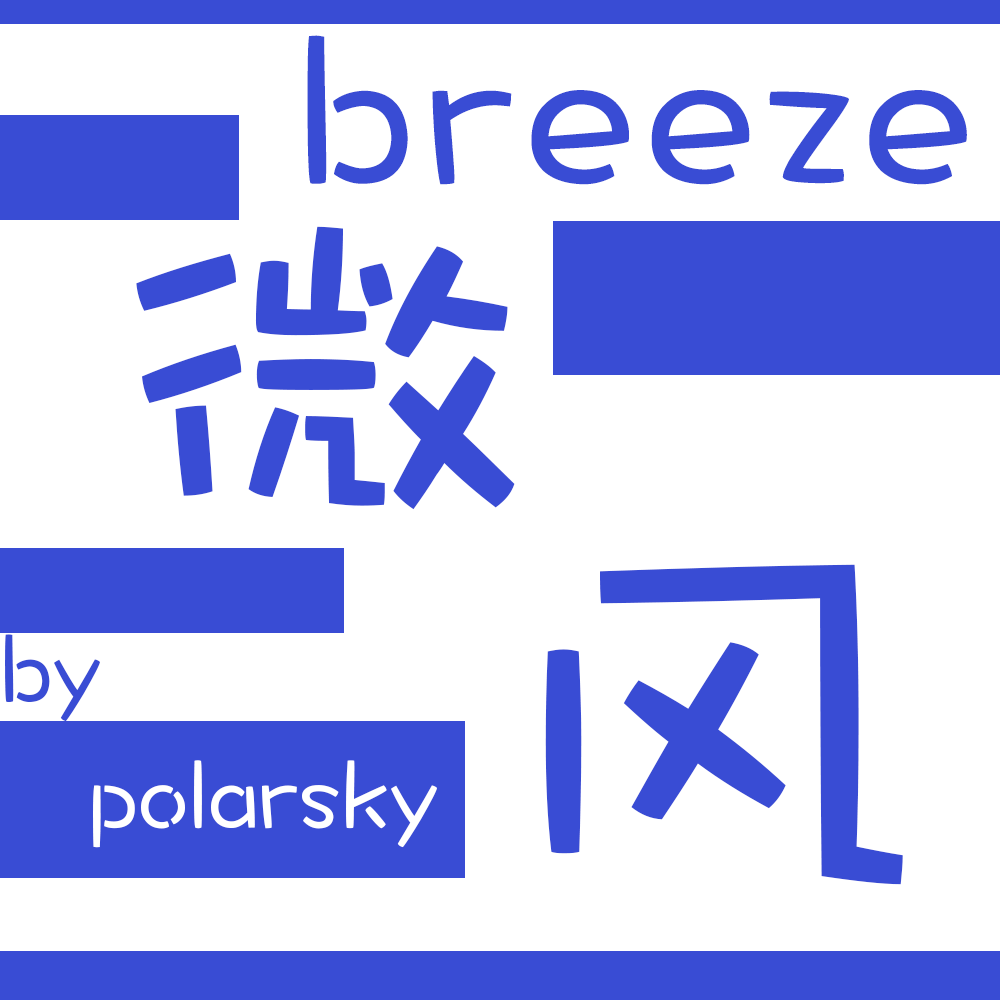
<style>
.page{position:relative;width:1000px;height:1000px;background:#ffffff}
.page>*{position:absolute;margin:0}
.t1{font:221.2px "DFWaWaSC-W5";letter-spacing:0.04em;color:#394cd4}
.t2{font:435px "DFWaWaSC-W5";color:#394cd4}
.t3{font:507px "DFWaWaSC-W5";color:#394cd4}
.t4{font:101px "DFWaWaSC-W5";color:#394cd4}
.t5{font:101px "DFWaWaSC-W5";color:#ffffff}
</style>
<div class="page">
<p class="t1" style="left:307px;top:35px;width:660px;height:150px">breeze</p>
<p class="t2" style="left:136px;top:226px;width:379px;height:284px">微</p>
<p class="t3" style="left:545px;top:564px;width:358px;height:321px">风</p>
<p class="t4" style="left:5px;top:634px;width:95px;height:88px">by</p>
<p class="t5" style="left:93px;top:760px;width:344px;height:88px">polarsky</p>
</div>
